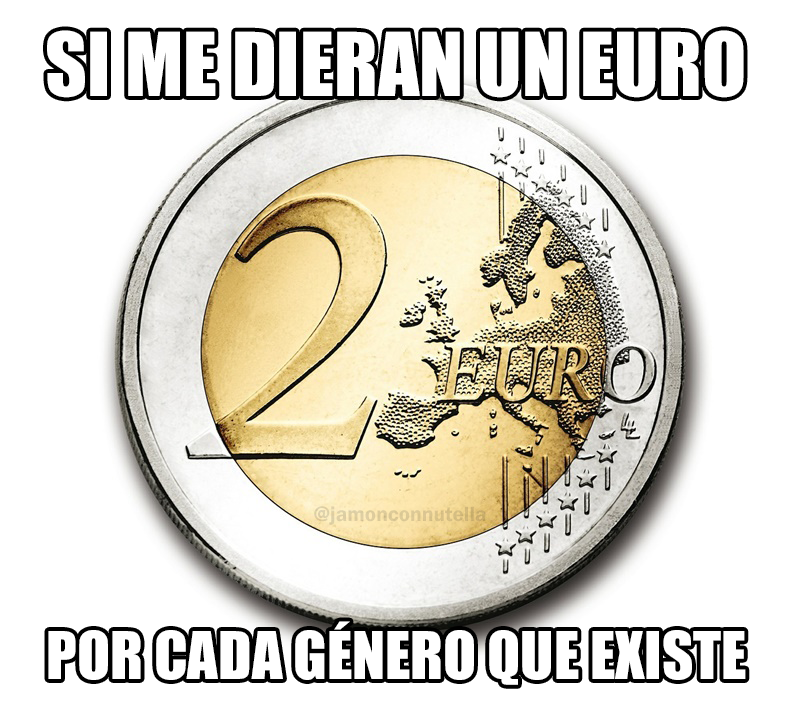
<style>
.page{position:relative;width:800px;height:709px;background:#ffffff}
.page>*{position:absolute;margin:0}
.t1{font:81.4px "Impact";color:#ffffff}
.t2{font:21.3px "FranklinGothic-Demi";color:#dbc895}
.t3{font:60.8px "Impact";color:#ffffff}
</style>
<div class="page">
<p class="t1" style="left:47px;top:30px;width:697px;height:68px">SI ME DIERAN UN EURO</p>
<p class="t2" style="left:314px;top:506px;width:172px;height:19px">@jamonconnutella</p>
<p class="t3" style="left:48px;top:621px;width:698px;height:64px">POR CADA GÉNERO QUE EXISTE</p>
</div>
